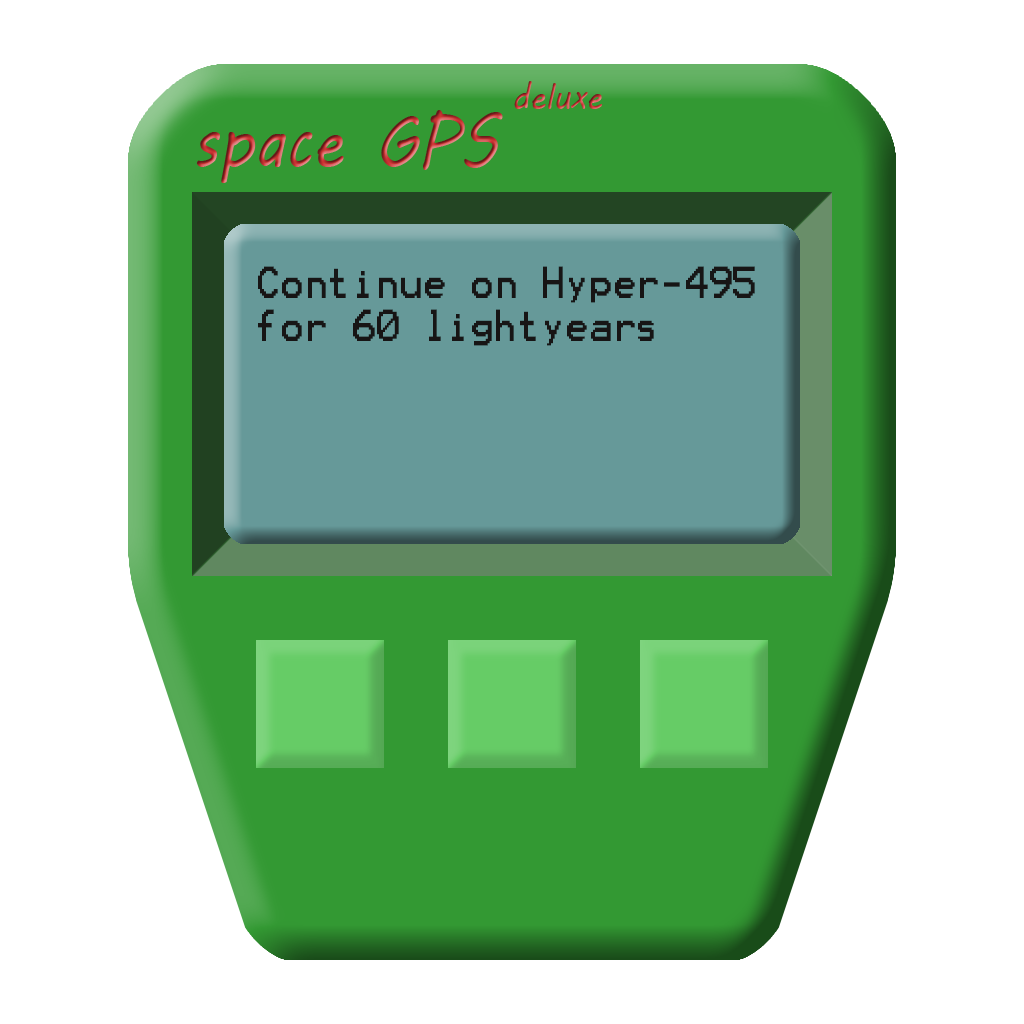
<style>
.page{position:relative;width:1024px;height:1024px;background:#ffffff}
.page>*{position:absolute;margin:0}
.t1{font:36px "MVBoli";scale:0.88 1}
.t2{font:72px "MVBoli";scale:0.88 1}
.t3{font:36px "Terminal";color:#171515;scale:0.88 1}
</style>
<div class="page">
<p class="t1" style="left:514px;top:81px;width:88px;height:28px">deluxe</p>
<p class="t2" style="left:196px;top:110px;width:307px;height:73px">space GPS</p>
<p class="t3" style="left:258px;top:266px;width:497px;height:80px">Continue on Hyper-495<br>for 60 lightyears</p>
</div>
